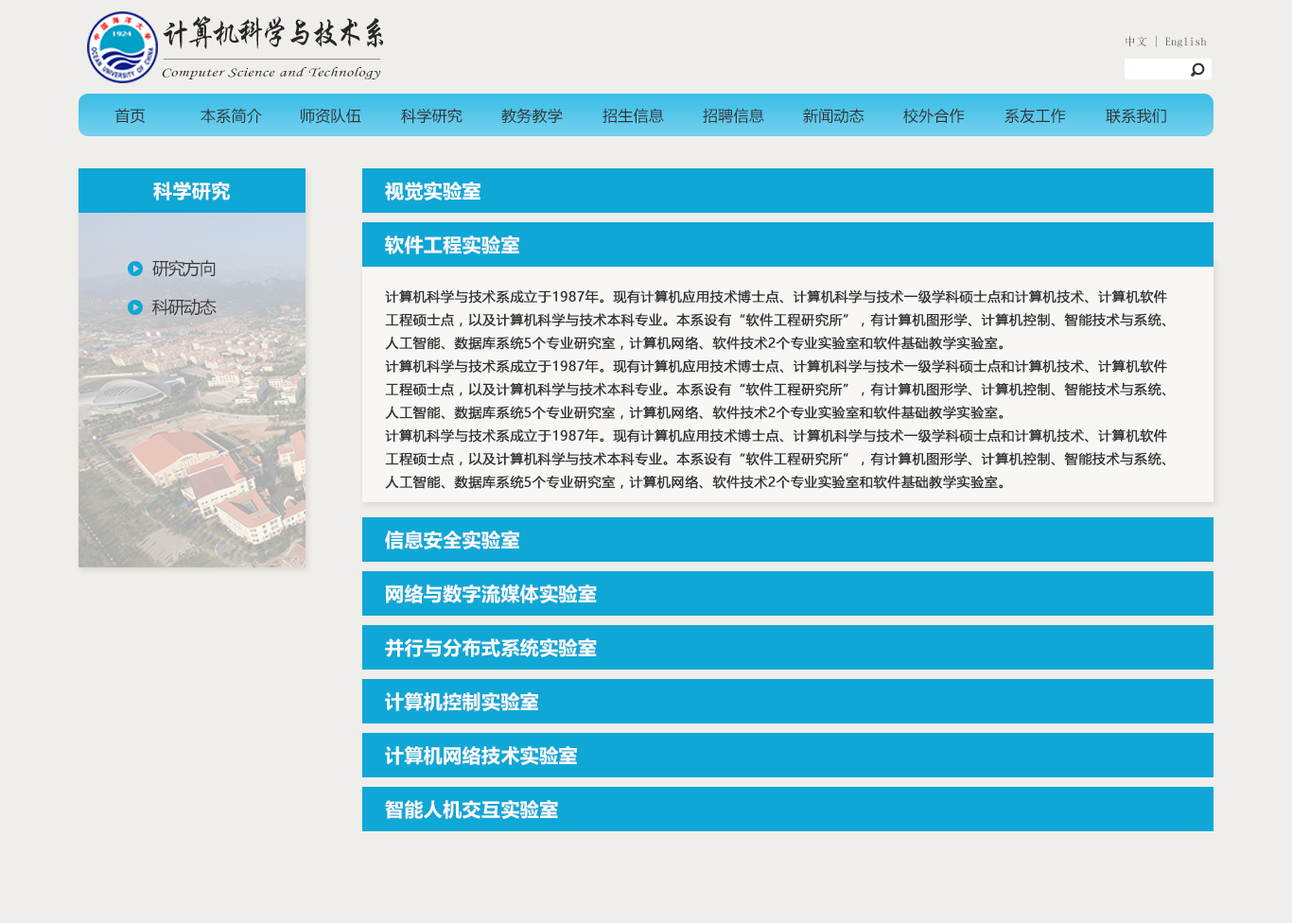
<style>
.page{position:relative;width:1292px;height:923px;background:#f0eeea}
.page>*{position:absolute;margin:0}
.t1{font:32.9px "STXingkai";letter-spacing:-0.14em;color:#272727;scale:0.88 1}
.t2{font:11.3px "SimSun";letter-spacing:0.02em}
.t3{font:13px "STLiti";letter-spacing:0.02em;color:#272727;scale:1.34 1}
.t4{font:15.1px "MicrosoftYaHei";letter-spacing:0.02em;color:#333333}
.t5{font:18.9px "MicrosoftYaHei-Bold";letter-spacing:0.02em;color:#f9f9f9}
.t6{font:18.9px "MicrosoftYaHei-Bold";letter-spacing:0.02em;color:#ffffff}
.t7{font:17px "MicrosoftYaHei";letter-spacing:-0.076em;color:#383838}
.t8{font:13.2px "MicrosoftYaHei";letter-spacing:0.02em;color:#333333;font-weight:bold}
</style>
<div class="page">
<p class="t1" style="left:163px;top:16px;width:221px;height:33px">计算机科学与技术系</p>
<p class="t2" style="left:1125px;top:35px;width:82px;height:12px">中文 | English</p>
<p class="t3" style="left:162px;top:67px;width:219px;height:12px">Computer Science and Technology</p>
<p class="t4" style="left:114px;top:108px;width:31px;height:16px">首页</p>
<p class="t4" style="left:200px;top:108px;width:62px;height:16px">本系简介</p>
<p class="t4" style="left:301px;top:108px;width:60px;height:16px">师资队伍</p>
<p class="t4" style="left:401px;top:108px;width:61px;height:16px">科学研究</p>
<p class="t4" style="left:501px;top:108px;width:62px;height:16px">教务教学</p>
<p class="t4" style="left:602px;top:108px;width:62px;height:16px">招生信息</p>
<p class="t4" style="left:703px;top:108px;width:61px;height:16px">招聘信息</p>
<p class="t4" style="left:803px;top:108px;width:61px;height:16px">新闻动态</p>
<p class="t4" style="left:903px;top:108px;width:62px;height:16px">校外合作</p>
<p class="t4" style="left:1004px;top:108px;width:62px;height:16px">系友工作</p>
<p class="t4" style="left:1106px;top:108px;width:60px;height:16px">联系我们</p>
<p class="t5" style="left:153px;top:182px;width:77px;height:18px">科学研究</p>
<p class="t6" style="left:385px;top:182px;width:95px;height:18px">视觉实验室</p>
<p class="t5" style="left:385px;top:235px;width:134px;height:19px">软件工程实验室</p>
<p class="t7" style="left:152px;top:260px;width:64px;height:17px">研究方向</p>
<p class="t8" style="left:385px;top:289px;width:782px;height:200px">计算机科学与技术系成立于1987年。现有计算机应用技术博士点、计算机科学与技术一级学科硕士点和计算机技术、计算机软件工程硕士点，以及计算机科学与技术本科专业。本系设有“软件工程研究所”，有计算机图形学、计算机控制、智能技术与系统、人工智能、数据库系统5个专业研究室，计算机网络、软件技术2个专业实验室和软件基础教学实验室。<br>计算机科学与技术系成立于1987年。现有计算机应用技术博士点、计算机科学与技术一级学科硕士点和计算机技术、计算机软件工程硕士点，以及计算机科学与技术本科专业。本系设有“软件工程研究所”，有计算机图形学、计算机控制、智能技术与系统、人工智能、数据库系统5个专业研究室，计算机网络、软件技术2个专业实验室和软件基础教学实验室。<br>计算机科学与技术系成立于1987年。现有计算机应用技术博士点、计算机科学与技术一级学科硕士点和计算机技术、计算机软件工程硕士点，以及计算机科学与技术本科专业。本系设有“软件工程研究所”，有计算机图形学、计算机控制、智能技术与系统、人工智能、数据库系统5个专业研究室，计算机网络、软件技术2个专业实验室和软件基础教学实验室。</p>
<p class="t7" style="left:152px;top:299px;width:65px;height:17px">科研动态</p>
<p class="t5" style="left:385px;top:531px;width:134px;height:18px">信息安全实验室</p>
<p class="t5" style="left:386px;top:584px;width:211px;height:19px">网络与数字流媒体实验室</p>
<p class="t5" style="left:385px;top:638px;width:212px;height:19px">并行与分布式系统实验室</p>
<p class="t5" style="left:385px;top:692px;width:153px;height:19px">计算机控制实验室</p>
<p class="t5" style="left:385px;top:746px;width:192px;height:19px">计算机网络技术实验室</p>
<p class="t5" style="left:385px;top:800px;width:173px;height:19px">智能人机交互实验室</p>
</div>
